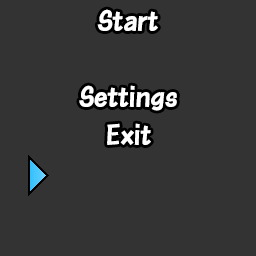
<style>
.page{position:relative;width:256px;height:256px;background:#333333}
.page>*{position:absolute;margin:0}
.t1{font:28px "DFKakuPop-W7-WINP-RKSJ-H";color:#ffffff}
</style>
<div class="page">
<p class="t1" style="left:97px;top:9px;width:61px;height:22px">Start</p>
<p class="t1" style="left:79px;top:85px;width:98px;height:26px">Settings</p>
<p class="t1" style="left:107px;top:123px;width:44px;height:22px">Exit</p>
</div>
